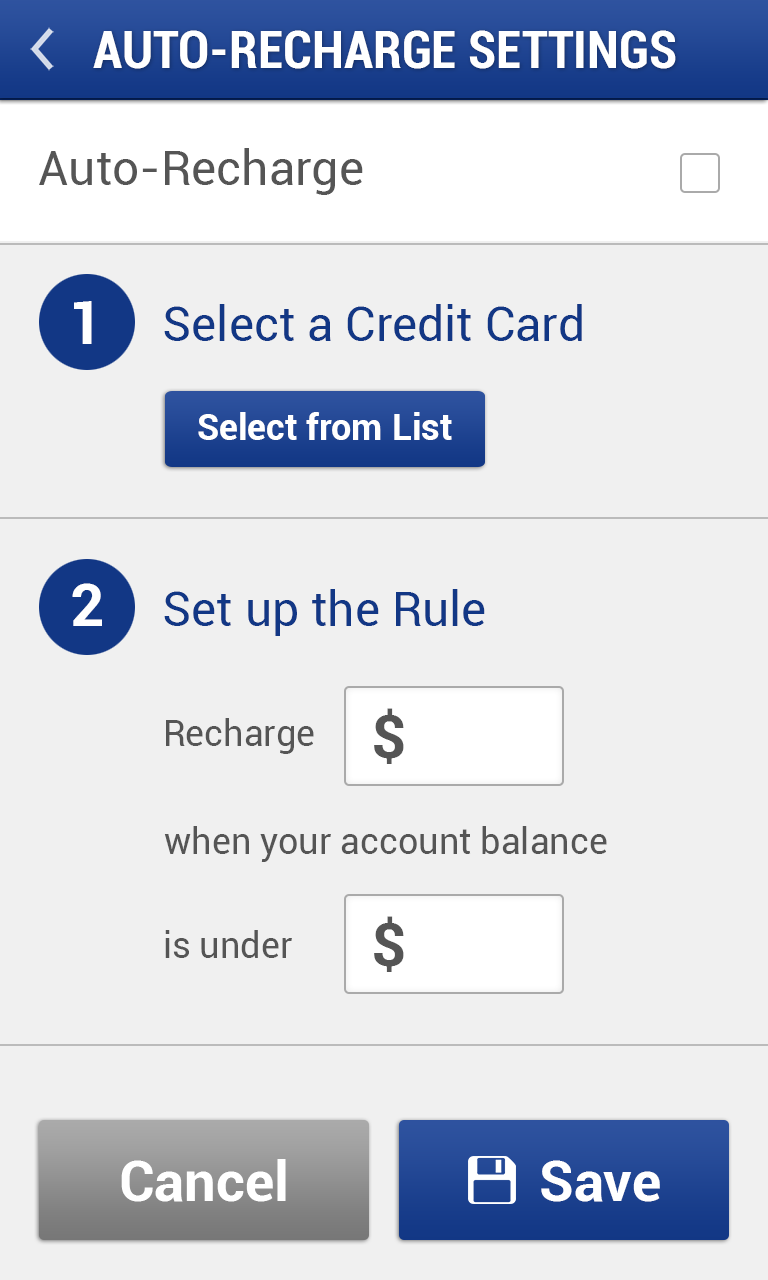
<style>
.page{position:relative;width:768px;height:1280px;background:#f0f0f0}
.page>*{position:absolute;margin:0}
.t1{font:52px "Roboto-BoldCondensed";color:#ffffff}
.t2{font:48px "Roboto-Regular";color:#555555}
.t3{font:60px "Roboto-Bold";color:#ffffff}
.t4{font:48px "Roboto-Regular";color:#123785}
.t5{font:36px "Roboto-Bold";color:#ffffff}
.t6{font:60px "Roboto-Bold";color:#555555}
.t7{font:36px "Roboto-Regular";color:#555555}
.t8{font:56px "Roboto-Bold";color:#ffffff}
</style>
<div class="page">
<p class="t1" style="left:93px;top:30px;width:583px;height:39px">AUTO-RECHARGE SETTINGS</p>
<p class="t2" style="left:39px;top:148px;width:324px;height:47px">Auto-Recharge</p>
<p class="t3" style="left:74px;top:301px;width:18px;height:43px">1</p>
<p class="t4" style="left:164px;top:304px;width:418px;height:37px">Select a Credit Card</p>
<p class="t5" style="left:198px;top:412px;width:254px;height:28px">Select from List</p>
<p class="t3" style="left:72px;top:583px;width:30px;height:43px">2</p>
<p class="t4" style="left:164px;top:589px;width:321px;height:47px">Set up the Rule</p>
<p class="t6" style="left:374px;top:708px;width:30px;height:56px">$</p>
<p class="t7" style="left:166px;top:718px;width:148px;height:36px">Recharge</p>
<p class="t7" style="left:164px;top:826px;width:443px;height:36px">when your account balance</p>
<p class="t6" style="left:374px;top:916px;width:30px;height:56px">$</p>
<p class="t7" style="left:165px;top:930px;width:127px;height:28px">is under</p>
<p class="t8" style="left:121px;top:1159px;width:165px;height:43px">Cancel</p>
<p class="t8" style="left:541px;top:1160px;width:119px;height:42px">Save</p>
</div>
